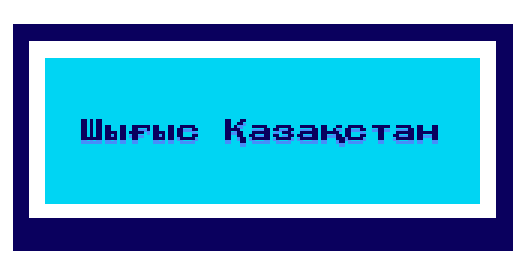
<style>
.page{position:relative;width:525px;height:275px;background:#00d5f3}
.page>*{position:absolute;margin:0}
.t1{font:24px "PressStart2P-Regular";color:#0a005e}
</style>
<div class="page">
<p class="t1" style="left:81px;top:119px;width:357px;height:24px">Шығыс Қазақстан</p>
</div>
